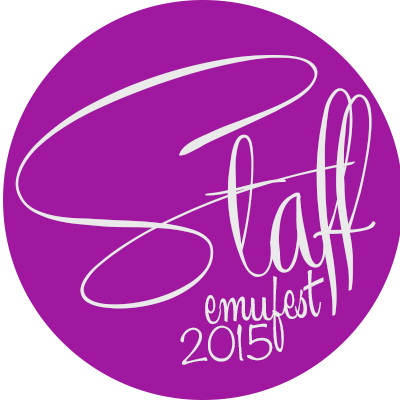
<style>
.page{position:relative;width:400px;height:400px;background:#a017a0}
.page>*{position:absolute;margin:0}
.t1{font:320px "RecordaScriptPersonalUseOnly";color:#eaeaea}
.t2{font:71.8px "EsplanadeScriptPERSONALUSE";color:#eaeaea}
.t3{font:42px "Noteworthy-Light";color:#eaeaea}
</style>
<div class="page">
<p class="t1" style="left:15px;top:55px;width:361px;height:261px;rotate:-9deg">Staff</p>
<p class="t2" style="left:205px;top:269px;width:119px;height:83px;rotate:-4deg">emufest</p>
<p class="t3" style="left:180px;top:323px;width:93px;height:42px;rotate:-4deg">2015</p>
</div>
